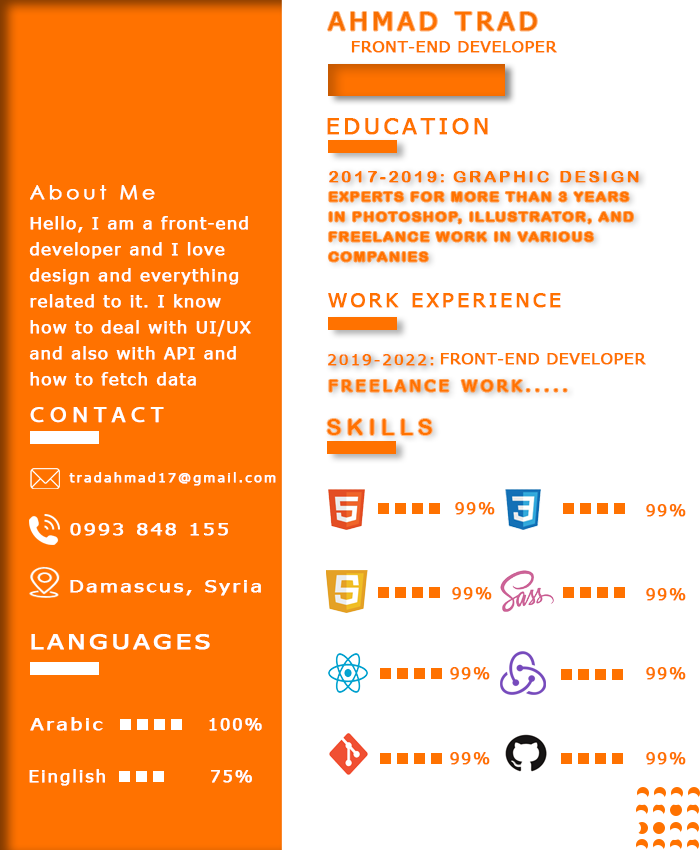
<style>
.page{position:relative;width:700px;height:850px;background:#ffffff}
.page>*{position:absolute;margin:0}
.t1{font:24.2px "Tahoma";letter-spacing:0.15em;color:#ff7200;text-transform:uppercase;font-weight:bold;scale:1.12 1}
.t2{font:14.7px "Tahoma";letter-spacing:0.05em;color:#ff7200;text-transform:uppercase;font-weight:bold;scale:1.12 1}
.t3{font:21.6px "Tahoma";letter-spacing:0.15em;color:#ff7200;text-transform:uppercase;font-weight:bold;scale:1.1 1}
.t4{font:15.1px "ArialRoundedMTBold";letter-spacing:0.15em;color:#ff7200;text-transform:uppercase;font-weight:bold;scale:1.1 1}
.t5{font:19px "CenturyGothic";letter-spacing:0.16em;color:#ffffff;font-weight:bold;scale:1.07 1}
.t6{font:13px/20px "ArialRoundedMTBold";letter-spacing:0.09em;color:#ff7200;text-transform:uppercase;font-weight:bold;scale:1.1 1}
.t7{font:16.5px/26px "Tahoma";letter-spacing:0.06em;color:#ffffff;font-weight:bold;scale:1.1 1}
.t8{font:18.9px "Tahoma";letter-spacing:0.13em;color:#ff7200;text-transform:uppercase;font-weight:bold;scale:1.12 1}
.t9{font:14.7px "Tahoma";letter-spacing:0.13em;color:#ff7200;text-transform:uppercase;font-weight:bold;scale:1.12 1}
.t10{font:14.7px "Tahoma";letter-spacing:0.23em;color:#ff7200;text-transform:uppercase;font-weight:bold;scale:1.12 1}
.t11{font:42.7px "MyriadArabic-Regular";letter-spacing:0.12em;color:#ffffff;font-variant:small-caps;font-weight:bold;scale:1.1 1}
.t12{font:21.6px "ArialRoundedMTBold";letter-spacing:0.23em;color:#ff7200;text-transform:uppercase;scale:1.05 1}
.t13{font:12.6px "Tahoma";letter-spacing:0.15em;color:#ffffff;font-weight:bold;scale:1.1 1}
.t14{font:15.5px "Tahoma";letter-spacing:0.1em;color:#ff7200;font-weight:bold;scale:1.1 1}
.t15{font:15.5px "Tahoma";letter-spacing:0.12em;color:#ffffff;font-weight:bold;scale:1.33 1}
.t16{font:20.4px "Tahoma";letter-spacing:0.12em;color:#ffffff;text-transform:uppercase;font-weight:bold;scale:1.33 1}
.t17{font:16.5px "Tahoma";letter-spacing:0.1em;color:#ffffff;font-weight:bold;scale:1.1 1}
</style>
<div class="page">
<p class="t1" style="left:328px;top:12px;width:209px;height:19px">ahmad trad</p>
<p class="t2" style="left:351px;top:41px;width:206px;height:12px">front-end developer</p>
<p class="t3" style="left:327px;top:118px;width:161px;height:17px">EDUCATION</p>
<p class="t4" style="left:329px;top:171px;width:115px;height:12px">2017-2019:</p>
<p class="t4" style="left:453px;top:171px;width:186px;height:12px">Graphic Design</p>
<p class="t5" style="left:30px;top:185px;width:125px;height:15px">About Me</p>
<p class="t6" style="left:328px;top:192px;width:305px;height:70px">Experts for more than 3 years in Photoshop, Illustrator, and freelance work in various companies</p>
<p class="t7" style="left:29px;top:216px;width:222px;height:170px">Hello, I am a front-end developer and I love design and everything related to it. I know how to deal with UI/UX and also with API and how to fetch data</p>
<p class="t8" style="left:328px;top:293px;width:233px;height:15px">WORK EXPERIENCE</p>
<p class="t2" style="left:440px;top:353px;width:206px;height:12px">front-end developer</p>
<p class="t9" style="left:328px;top:354px;width:106px;height:12px">2019-2022:</p>
<p class="t10" style="left:329px;top:380px;width:238px;height:12px">freelance work.....</p>
<p class="t11" style="left:30px;top:407px;width:134px;height:16px">contact</p>
<p class="t12" style="left:327px;top:419px;width:105px;height:16px">SKILLS</p>
<p class="t13" style="left:69px;top:472px;width:207px;height:14px">tradahmad17@gmail.com</p>
<p class="t14" style="left:455px;top:502px;width:40px;height:13px">99%</p>
<p class="t14" style="left:646px;top:504px;width:40px;height:13px">99%</p>
<p class="t15" style="left:70px;top:523px;width:158px;height:13px">0993 848 155</p>
<p class="t15" style="left:70px;top:580px;width:191px;height:16px">Damascus, Syria</p>
<p class="t14" style="left:452px;top:587px;width:40px;height:13px">99%</p>
<p class="t14" style="left:646px;top:588px;width:40px;height:13px">99%</p>
<p class="t16" style="left:31px;top:634px;width:179px;height:16px">languages</p>
<p class="t14" style="left:450px;top:667px;width:40px;height:13px">99%</p>
<p class="t14" style="left:646px;top:667px;width:40px;height:13px">99%</p>
<p class="t15" style="left:30px;top:717px;width:73px;height:14px">Arabic</p>
<p class="t17" style="left:209px;top:718px;width:53px;height:13px">100%</p>
<p class="t14" style="left:450px;top:752px;width:40px;height:13px">99%</p>
<p class="t14" style="left:646px;top:752px;width:40px;height:13px">99%</p>
<p class="t17" style="left:29px;top:769px;width:76px;height:17px">Einglish</p>
<p class="t17" style="left:211px;top:770px;width:41px;height:13px">75%</p>
</div>
